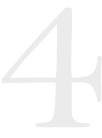
<style>
.page{position:relative;width:102px;height:138px;background:#ffffff}
.page>*{position:absolute;margin:0}
.t1{font:224.1px "BellMT";letter-spacing:0.02em;color:#ebebeb}
</style>
<div class="page">
<p class="t1" style="left:2px;top:7px;width:100px;height:121px">4</p>
</div>
